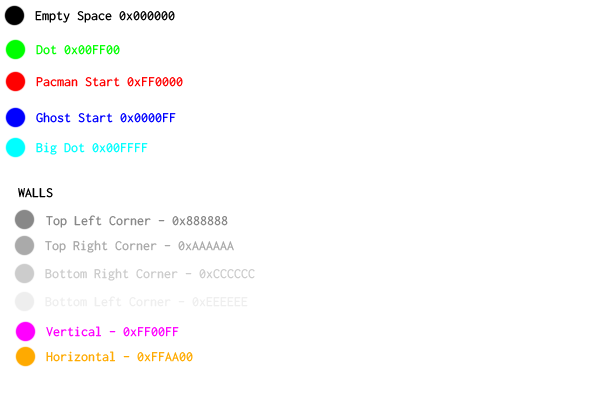
<style>
.page{position:relative;width:600px;height:400px;background:#ffffff}
.page>*{position:absolute;margin:0}
.t1{font:14px "Inconsolata";color:#000000}
.t2{font:14px "Inconsolata";color:#00ff00}
.t3{font:14px "Inconsolata";color:#ff0000}
.t4{font:14px "Inconsolata";color:#0000ff}
.t5{font:14px "Inconsolata";color:#00ffff}
.t6{font:14px "Inconsolata";color:#888888}
.t7{font:14px "Inconsolata";color:#aaaaaa}
.t8{font:14px "Inconsolata";color:#cccccc}
.t9{font:14px "Inconsolata";color:#eeeeee}
.t10{font:14px "Inconsolata";color:#ff00ff}
.t11{font:14px "Inconsolata";color:#ffaa00}
</style>
<div class="page">
<p class="t1" style="left:35px;top:11px;width:140px;height:12px">Empty Space 0x000000</p>
<p class="t2" style="left:36px;top:45px;width:84px;height:10px">Dot 0x00FF00</p>
<p class="t3" style="left:36px;top:77px;width:147px;height:10px">Pacman Start 0xFF0000</p>
<p class="t4" style="left:36px;top:112px;width:140px;height:11px">Ghost Start 0x0000FF</p>
<p class="t5" style="left:36px;top:142px;width:112px;height:13px">Big Dot 0x00FFFF</p>
<p class="t1" style="left:18px;top:188px;width:35px;height:10px">WALLS</p>
<p class="t6" style="left:46px;top:215px;width:182px;height:13px">Top Left Corner - 0x888888</p>
<p class="t7" style="left:45px;top:240px;width:189px;height:13px">Top Right Corner - 0xAAAAAA</p>
<p class="t8" style="left:45px;top:268px;width:210px;height:13px">Bottom Right Corner - 0xCCCCCC</p>
<p class="t9" style="left:45px;top:296px;width:203px;height:11px">Bottom Left Corner - 0xEEEEEE</p>
<p class="t10" style="left:46px;top:326px;width:133px;height:11px">Vertical - 0xFF00FF</p>
<p class="t11" style="left:46px;top:351px;width:147px;height:11px">Horizontal - 0xFFAA00</p>
</div>
